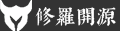
<style>
.page{position:relative;width:120px;height:31px;background:#333333}
.page>*{position:absolute;margin:0}
.t1{font:22.1px "ygy_guke";letter-spacing:-0.06em;color:#ffffff}
</style>
<div class="page">
<p class="t1" style="left:35px;top:7px;width:81px;height:19px">修罗开源</p>
</div>
